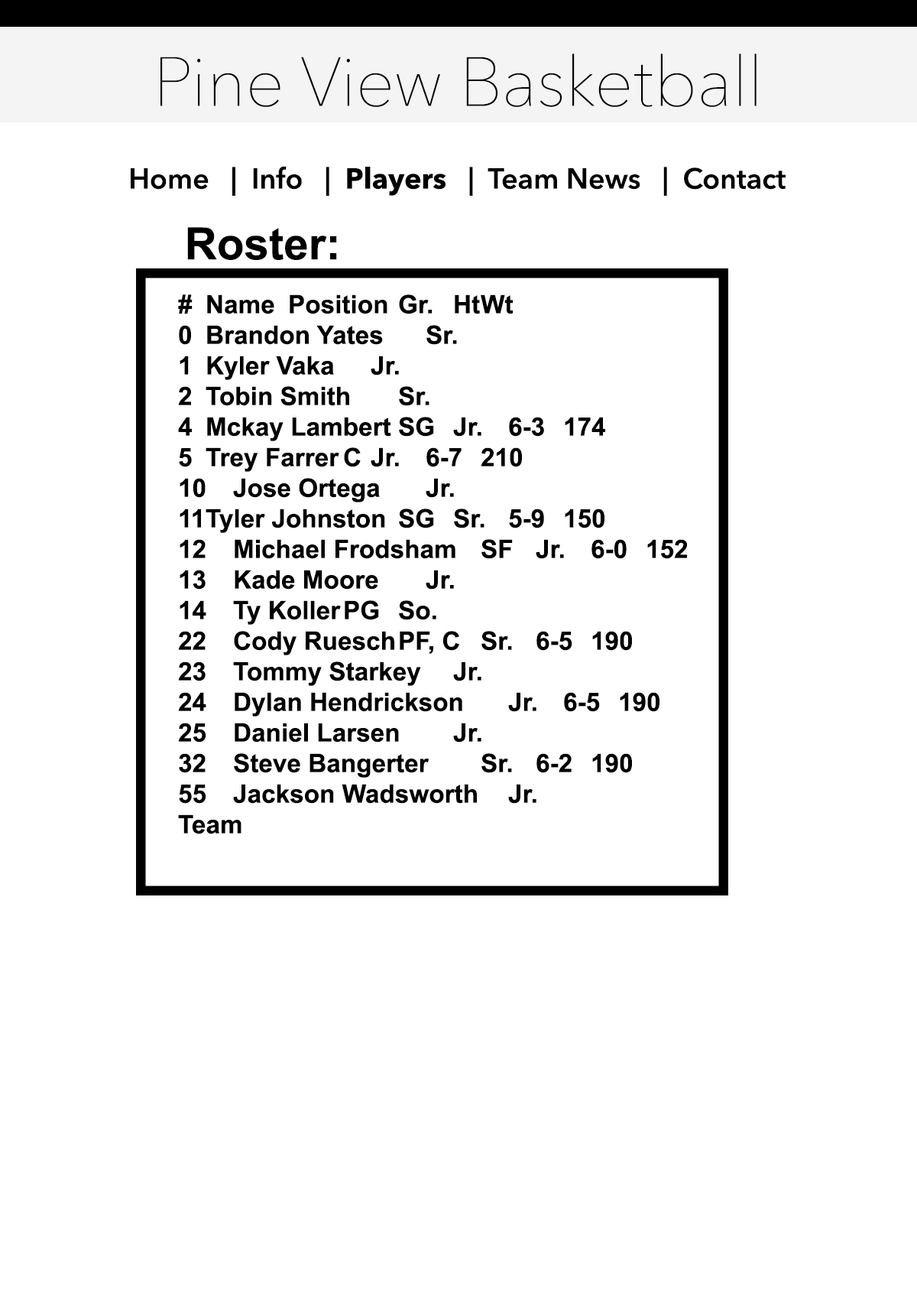
<style>
.page{position:relative;width:917px;height:1300px;background:#ffffff}
.page>*{position:absolute;margin:0}
.t1{font:68.8px "AvenirNext-UltraLight";color:#000000}
.t2{font:28.7px "AvenirNext-DemiBold";color:#000000}
.t3{font:28.7px "AvenirNext-Bold";color:#000000}
.t4{font:44.6px "Arial-BoldMT";color:#000000}
.t5{font:25.5px "Arial-BoldMT";color:#000000}
</style>
<div class="page">
<p class="t1" style="left:161px;top:54px;width:596px;height:53px">Pine View Basketball</p>
<p class="t2" style="left:131px;top:166px;width:655px;height:30px">Home   |  Info   |  <span class="t3">Players</span>   |  Team News   |  Contact</p>
<p class="t4" style="left:187px;top:227px;width:150px;height:33px">Roster:</p>
<p class="t5" style="left:178px;top:294px;width:509px;height:540px"># Name Position Gr. Ht Wt<br>0 Brandon Yates  Sr.  <br>1 Kyler Vaka  Jr.  <br>2 Tobin Smith  Sr.  <br>4 Mckay Lambert SG Jr. 6-3 174<br>5 Trey Farrer C Jr. 6-7 210<br>10 Jose Ortega  Jr.  <br>11 Tyler Johnston SG Sr. 5-9 150<br>12 Michael Frodsham SF Jr. 6-0 152<br>13 Kade Moore  Jr.  <br>14 Ty Koller PG So.  <br>22 Cody Ruesch PF, C Sr. 6-5 190<br>23 Tommy Starkey  Jr.  <br>24 Dylan Hendrickson  Jr. 6-5 190<br>25 Daniel Larsen  Jr.  <br>32 Steve Bangerter  Sr. 6-2 190<br>55 Jackson Wadsworth  Jr.  <br>Team</p>
</div>
